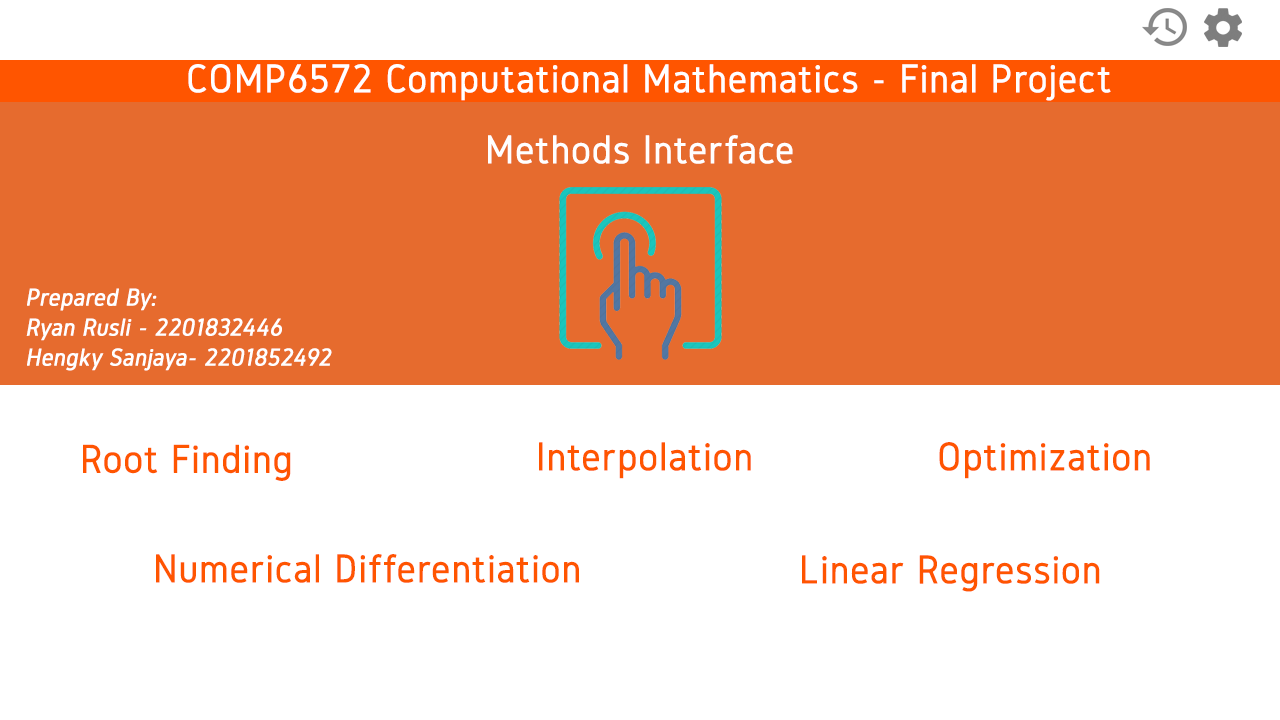
<style>
.page{position:relative;width:1280px;height:720px;background:#ffffff}
.page>*{position:absolute;margin:0}
.t1{font:41.7px "Gidole-Regular";color:#ffffff;font-weight:bold}
.t2{font:25px "Gidole-Regular";color:#ffffff;font-weight:bold;font-style:italic}
.t3{font:41.7px "Gidole-Regular";color:#ff5500;font-weight:bold}
</style>
<div class="page">
<p class="t1" style="left:188px;top:64px;width:923px;height:37px">COMP6572 Computational Mathematics - Final Project</p>
<p class="t1" style="left:488px;top:135px;width:305px;height:29px">Methods Interface</p>
<p class="t2" style="left:26px;top:288px;width:306px;height:83px">Prepared By: <br>Ryan Rusli - 2201832446<br>Hengky Sanjaya- 2201852492</p>
<p class="t3" style="left:83px;top:444px;width:208px;height:37px">Root Finding</p>
<p class="t3" style="left:539px;top:442px;width:212px;height:37px">Interpolation</p>
<p class="t3" style="left:939px;top:442px;width:211px;height:37px">Optimization</p>
<p class="t3" style="left:156px;top:554px;width:423px;height:29px">Numerical Differentiation</p>
<p class="t3" style="left:802px;top:555px;width:298px;height:37px">Linear Regression</p>
</div>
